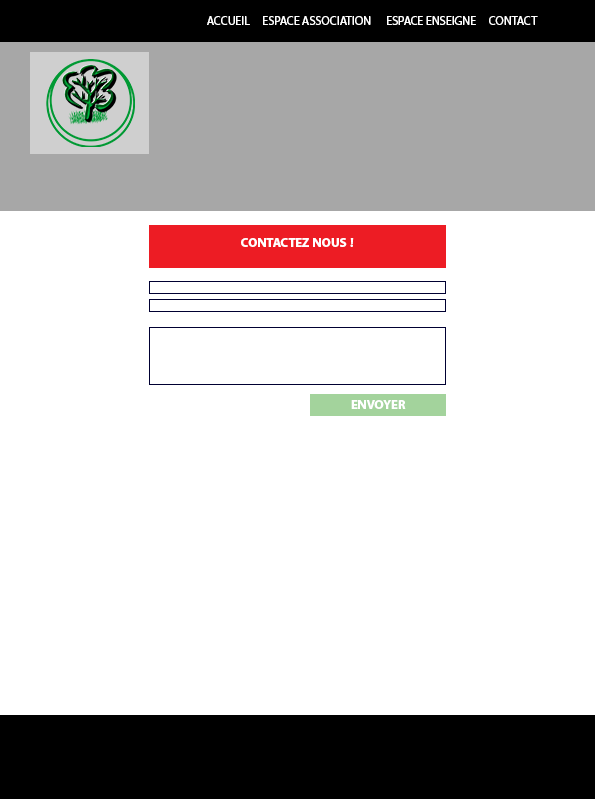
<style>
.page{position:relative;width:595px;height:799px;background:#ffffff}
.page>*{position:absolute;margin:0}
.t1{font:12px "MyriadPro-Regular";color:#ffffff}
.t2{font:18px "MyriadArabic-Bold";color:#ffffff}
</style>
<div class="page">
<p class="t1" style="left:207px;top:16px;width:331px;height:9px">ACCUEIL     ESPACE ASSOCIATION      ESPACE ENSEIGNE     CONTACT</p>
<p class="t2" style="left:241px;top:238px;width:113px;height:9px">CONTACTEZ NOUS !</p>
<p class="t2" style="left:351px;top:400px;width:55px;height:9px">ENVOYER</p>
</div>
